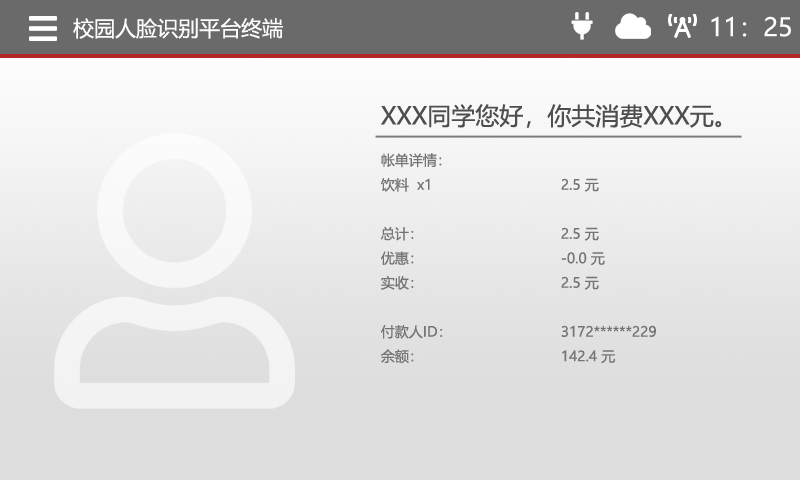
<style>
.page{position:relative;width:800px;height:480px}
.page>*{position:absolute;margin:0}
.t1{font:25px "MicrosoftYaHei";color:#fcfcfc}
.t2{font:21px "MicrosoftYaHei";color:#fcfcfc}
.t3{font:24px "MicrosoftYaHei";color:#4e4e4e}
.t4{font:14px "MicrosoftYaHei";color:#757474}
</style>
<div class="page">
<p class="t1" style="left:711px;top:16px;width:80px;height:21px">11：25</p>
<p class="t2" style="left:73px;top:18px;width:210px;height:21px">校园人脸识别平台终端</p>
<p class="t3" style="left:381px;top:104px;width:341px;height:24px">XXX同学您好，你共消费XXX元。</p>
<p class="t4" style="left:380px;top:153px;width:276px;height:211px">帐单详情：<br>饮料  x1    2.5 元<br><br>总计：      2.5 元<br>优惠：    -0.0 元<br>实收：    2.5 元<br><br>付款人ID：    3172******229<br>余额：    142.4 元</p>
</div>
